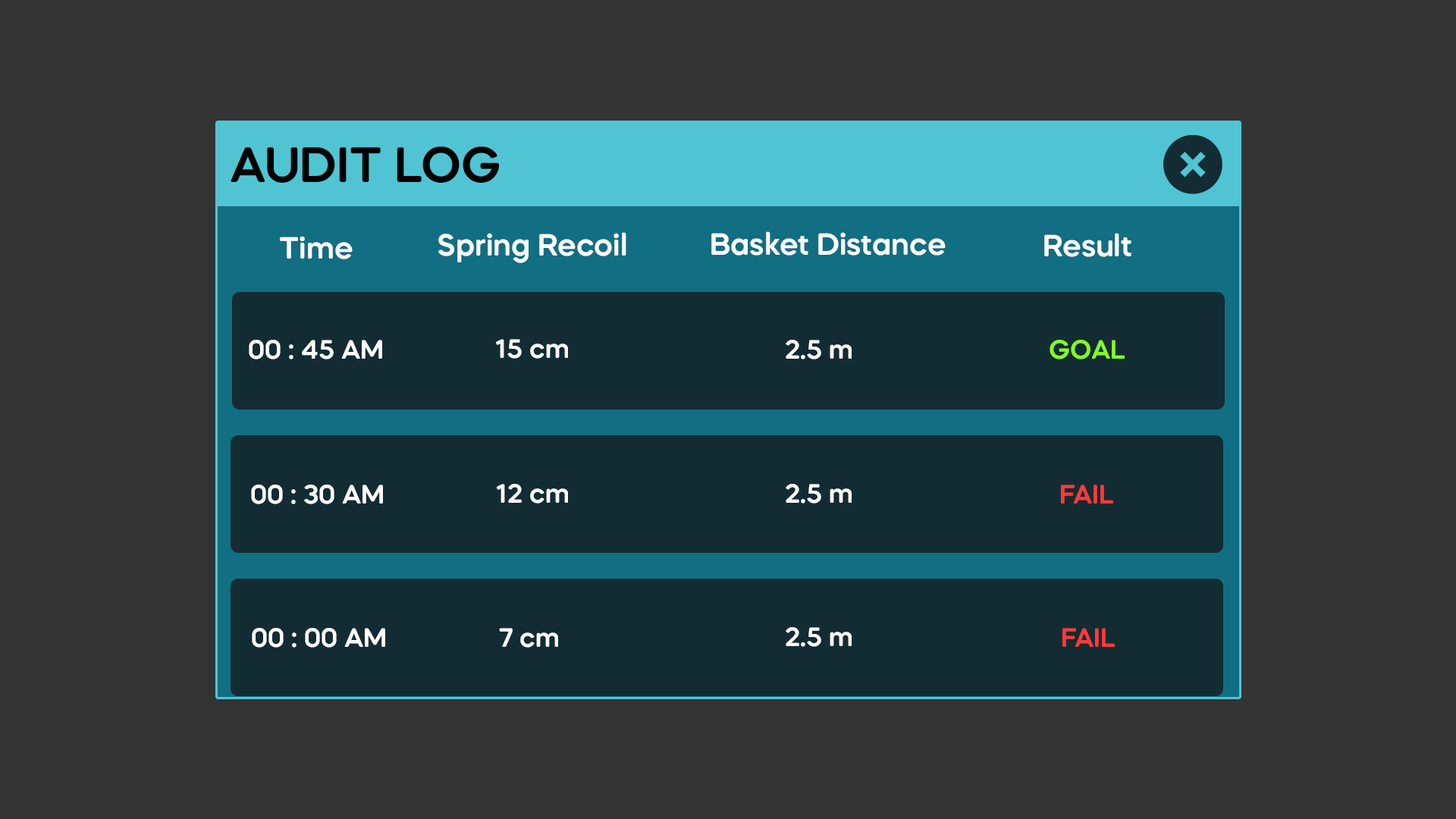
<style>
.page{position:relative;width:1456px;height:819px;background:#333333}
.page>*{position:absolute;margin:0}
.t1{font:49.7px "MazzardSoftH-SemiBold";color:#000000}
.t2{font:30.6px "MazzardSoftH-SemiBold";color:#ffffff}
.t3{font:26.5px "MazzardSoftH-SemiBold";color:#ffffff}
.t4{font:26.5px "MazzardSoftH-SemiBold";color:#84fa24}
.t5{font:26.5px "MazzardSoftH-SemiBold";color:#fe3a3a}
</style>
<div class="page">
<p class="t1" style="left:231px;top:146px;width:268px;height:37px">AUDIT LOG</p>
<p class="t2" style="left:438px;top:232px;width:188px;height:31px">Spring Recoil</p>
<p class="t2" style="left:711px;top:231px;width:235px;height:25px">Basket Distance</p>
<p class="t2" style="left:1044px;top:233px;width:87px;height:24px">Result</p>
<p class="t2" style="left:280px;top:236px;width:73px;height:23px">Time</p>
<p class="t3" style="left:249px;top:340px;width:133px;height:19px">00 : 45 AM</p>
<p class="t3" style="left:496px;top:339px;width:72px;height:20px">15 cm</p>
<p class="t3" style="left:786px;top:340px;width:66px;height:19px">2.5 m</p>
<p class="t4" style="left:1050px;top:340px;width:75px;height:19px">GOAL</p>
<p class="t3" style="left:251px;top:485px;width:132px;height:19px">00 : 30 AM</p>
<p class="t3" style="left:497px;top:484px;width:71px;height:20px">12 cm</p>
<p class="t3" style="left:786px;top:484px;width:66px;height:20px">2.5 m</p>
<p class="t5" style="left:1061px;top:485px;width:52px;height:19px">FAIL</p>
<p class="t3" style="left:252px;top:628px;width:133px;height:20px">00 : 00 AM</p>
<p class="t3" style="left:499px;top:628px;width:59px;height:20px">7 cm</p>
<p class="t3" style="left:786px;top:627px;width:66px;height:20px">2.5 m</p>
<p class="t5" style="left:1062px;top:628px;width:53px;height:19px">FAIL</p>
</div>
